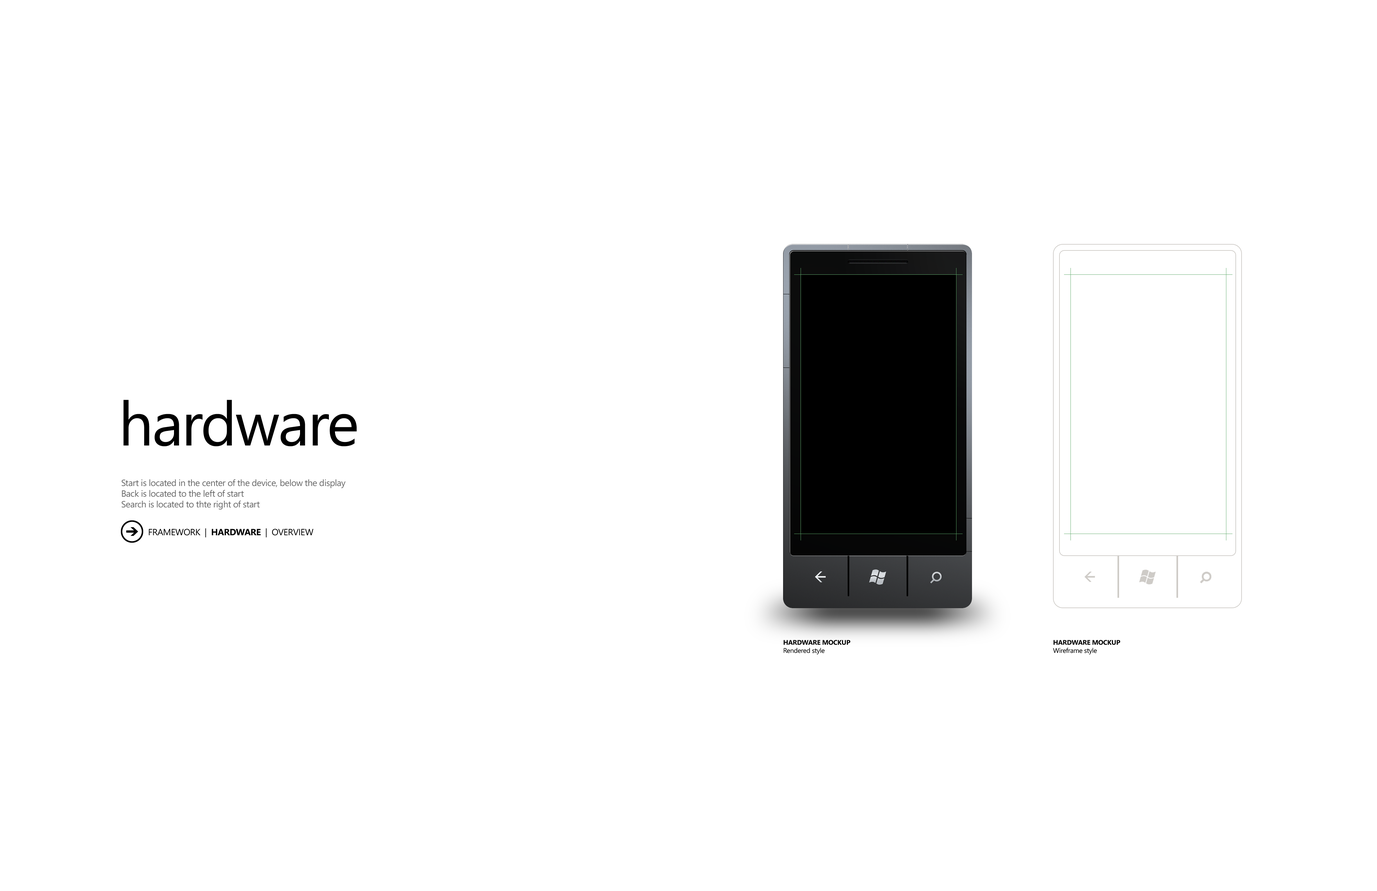
<style>
.page{position:relative;width:1377px;height:891px;background:#ffffff}
.page>*{position:absolute;margin:0}
.t1{font:61.5px "SegoeWP";letter-spacing:-0.025em;color:#000000}
.t2{font:9px "SegoeWP";letter-spacing:-0.025em;color:#666666}
.t3{font:9px "SegoeWP";letter-spacing:-0.025em;color:#000000}
.t4{font:9px "SegoeWP-Bold";letter-spacing:-0.025em;color:#000000}
.t5{font:6.7px "SegoeWP-Bold";letter-spacing:-0.025em;color:#000000;text-transform:uppercase}
.t6{font:6.7px "SegoeWP";letter-spacing:-0.025em;color:#000000}
</style>
<div class="page">
<p class="t1" style="left:123px;top:400px;width:234px;height:46px">hardware</p>
<p class="t2" style="left:121px;top:479px;width:225px;height:31px">Start is located in the center of the device, below the display<br>Back is located to the left of start<br>Search is located to thte right of start</p>
<p class="t3" style="left:149px;top:528px;width:164px;height:10px">FRAMEWORK  |  <span class="t4">HARDWARE</span>  |  OVERVIEW</p>
<p class="t5" style="left:783px;top:640px;width:67px;height:14px">hardware mockup<br><span class="t6">Rendered style</span></p>
<p class="t5" style="left:1053px;top:640px;width:67px;height:14px">hardware mockup<br><span class="t6">Wireframe style</span></p>
</div>
